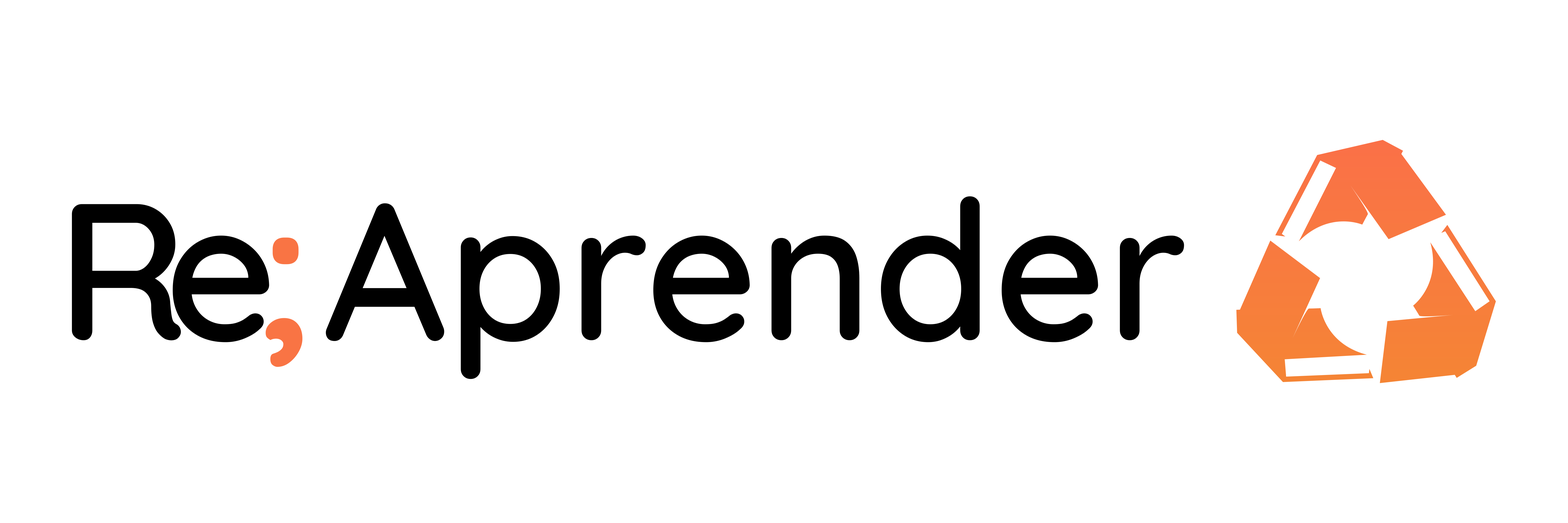
<style>
.page{position:relative;width:1568px;height:523px;background:#ffffff}
.page>*{position:absolute;margin:0}
.t1{font:194.3px "Quicksand-SemiBold";color:#000000}
.t2{font:194.3px "Quicksand-SemiBold";letter-spacing:-0.12em;color:#000000}
.t3{font:194.3px "Quicksand-Bold";letter-spacing:0.06em;color:#f97444}
</style>
<div class="page">
<p class="t1" style="left:72px;top:196px;width:1112px;height:183px"><span class="t2">Re</span><span class="t3">;</span>Aprender</p>
</div>
